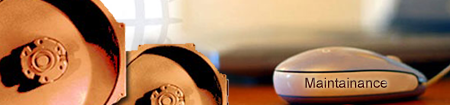
<style>
.page{position:relative;width:450px;height:105px}
.page>*{position:absolute;margin:0}
.t1{font:14.1px "ArialMT"}
</style>
<div class="page">
<p class="t1" style="left:305px;top:77px;width:83px;height:11px">Maintainance</p>
</div>
